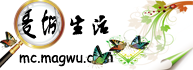
<style>
.page{position:relative;width:193px;height:70px;background:#ffffff}
.page>*{position:absolute;margin:0}
.t1{font:24px "FZSTK--GBK1-0";color:#000000}
.t2{font:24px "ÊéÌå·»Ã×ÜÀÌå";color:#000000}
.t3{font:14px "ComicSansMS";color:#000000}
.t4{font:14px "AdobeHeitiStd-Regular";color:#000000}
</style>
<div class="page">
<p class="t1" style="left:17px;top:6px;width:45px;height:33px">麦城</p>
<p class="t2" style="left:70px;top:15px;width:39px;height:21px">生活</p>
<p class="t3" style="left:19px;top:54px;width:94px;height:13px">mc.magwu.co<span class="t4">m</span></p>
</div>
